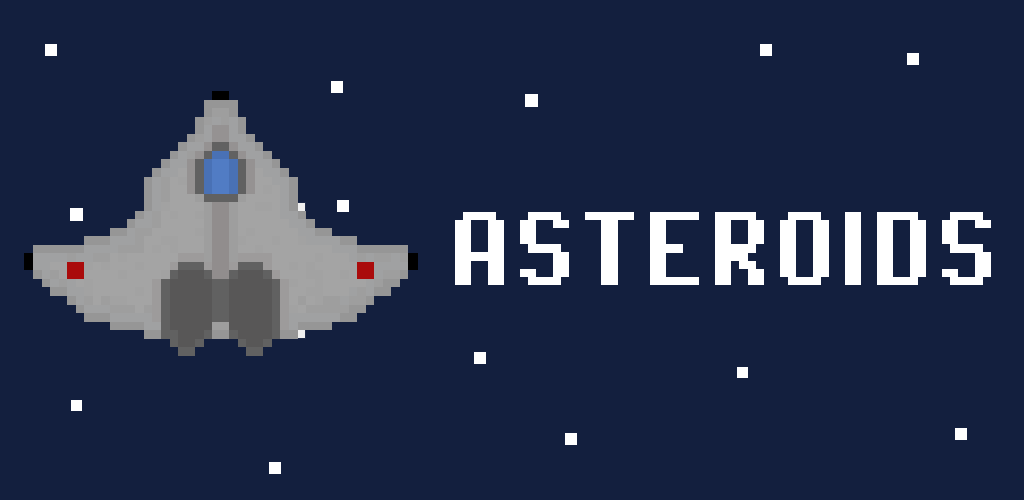
<style>
.page{position:relative;width:1024px;height:500px;background:#131f3e}
.page>*{position:absolute;margin:0}
.t1{font:130px "PixelOperator-Bold";color:#ffffff}
</style>
<div class="page">
<p class="t1" style="left:455px;top:212px;width:536px;height:73px">ASTEROIDS</p>
</div>
